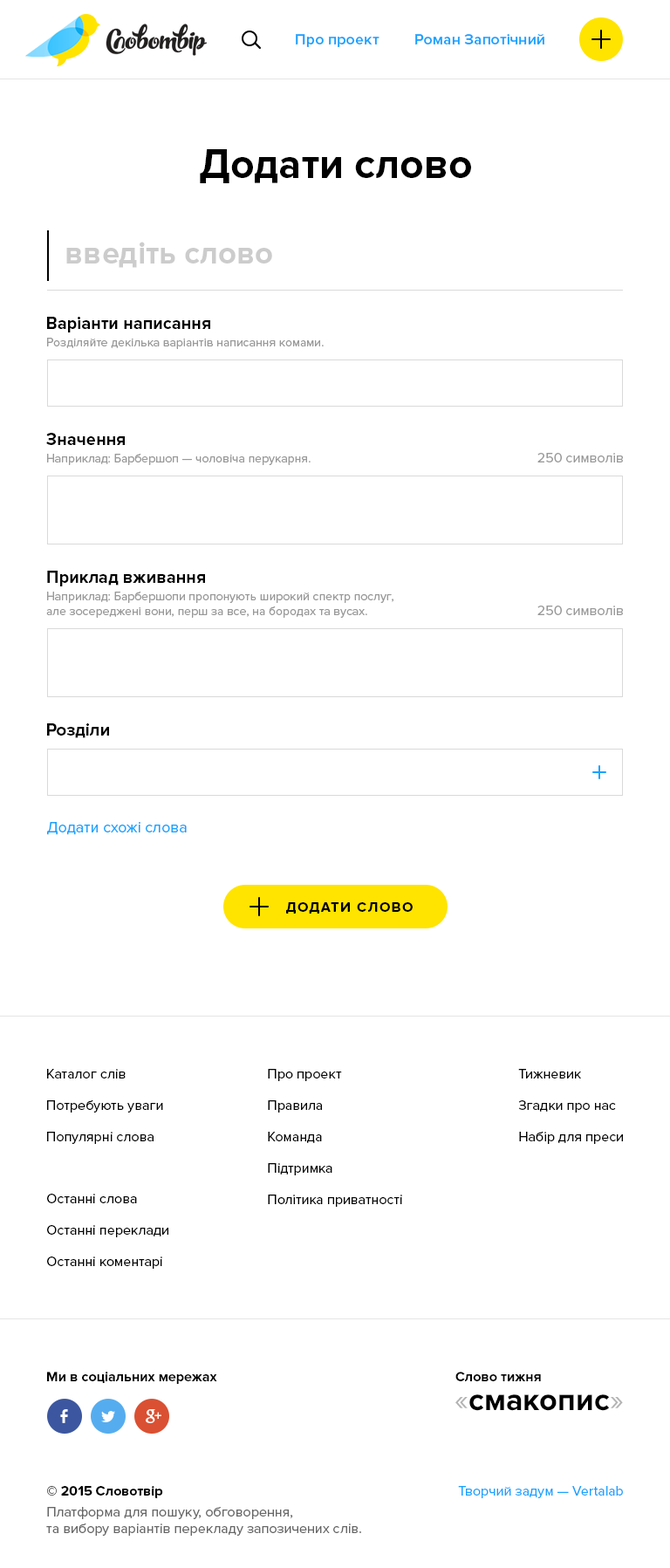
<style>
.page{position:relative;width:670px;height:1568px;background:#ffffff}
.page>*{position:absolute;margin:0}
.t1{font:15.7px "ProximaNova-Semibold";color:#17a2ff}
.t2{font:41.9px "ProximaNova-Bold";color:#000000}
.t3{font:31.4px "ProximaNova-Bold";color:#cccccc}
.t4{font:17.5px "ProximaNova-Bold";color:#000000}
.t5{font:12.2px "ProximaNova-Regular";color:#999999}
.t6{font:14px "ProximaNova-Regular";color:#999999}
.t7{font:17.4px "ProximaNova-Bold";color:#000000}
.t8{font:15.7px "ProximaNova-Regular";color:#17a2ff}
.t9{font:14px "ProximaNova-Bold";letter-spacing:0.1em;color:#000000;text-transform:uppercase}
.t10{font:14px/31.4px "ProximaNova-Regular";color:#000000}
.t11{font:14px/31.4px "ProximaNova-Regular";color:#010101}
.t12{font:14px "ProximaNova-Bold";color:#010101}
.t13{font:31.4px "ProximaNova-Bold";color:#000000}
.t14{font:31.4px "ProximaNova-Regular";color:#b3b3b3}
.t15{font:14px "ProximaNova-Regular";color:#666666}
.t16{font:14px/19.2px "ProximaNova-Bold";color:#000000}
.t17{font:14px/20.9px "ProximaNova-Regular";color:#666666}
.t18{font:14px "ProximaNova-Regular";color:#17a2ff}
</style>
<div class="page">
<p class="t1" style="left:296px;top:34px;width:84px;height:13px">Про проект</p>
<p class="t1" style="left:415px;top:34px;width:129px;height:11px">Роман Запотічний</p>
<p class="t2" style="left:200px;top:149px;width:271px;height:34px">Додати слово</p>
<p class="t3" style="left:66px;top:242px;width:206px;height:26px">введіть слово</p>
<p class="t4" style="left:47px;top:317px;width:163px;height:15px">Варіанти написання</p>
<p class="t5" style="left:47px;top:338px;width:277px;height:11px">Розділяйте декілька варіантів написання комами.</p>
<p class="t4" style="left:46px;top:433px;width:79px;height:12px">Значення</p>
<p class="t5" style="left:47px;top:454px;width:264px;height:11px">Наприклад: Барбершоп — чоловіча перукарня.</p>
<p class="t6" style="left:538px;top:453px;width:85px;height:9px">250 символів</p>
<p class="t4" style="left:47px;top:571px;width:158px;height:15px">Приклад вживання</p>
<p class="t5" style="left:46px;top:592px;width:348px;height:26px">Наприклад: Барбершопи пропонують широкий спектр послуг,<br>але зосереджені вони, перш за все, на бородах та вусах.</p>
<p class="t6" style="left:538px;top:606px;width:85px;height:9px">250 символів</p>
<p class="t7" style="left:47px;top:723px;width:62px;height:15px">Розділи</p>
<p class="t8" style="left:47px;top:822px;width:140px;height:13px">Додати схожі слова</p>
<p class="t9" style="left:286px;top:902px;width:127px;height:12px">Додати слово</p>
<p class="t10" style="left:47px;top:1069px;width:116px;height:75px">Каталог слів<br>Потребують уваги<br>Популярні слова</p>
<p class="t10" style="left:268px;top:1069px;width:134px;height:138px">Про проект<br>Правила<br>Команда<br>Підтримка<br>Політика приватності</p>
<p class="t11" style="left:518px;top:1069px;width:105px;height:75px">Тижневик<br>Згадки про нас<br>Набір для преси</p>
<p class="t10" style="left:47px;top:1194px;width:121px;height:75px">Останні слова<br>Останні переклади<br>Останні коментарі</p>
<p class="t12" style="left:47px;top:1372px;width:170px;height:12px">Ми в соціальних мережах</p>
<p class="t12" style="left:455px;top:1372px;width:86px;height:9px">Слово тижня</p>
<p class="t13" style="left:455px;top:1394px;width:168px;height:17px"><span class="t14">«</span>смакопис<span class="t14">»</span></p>
<p class="t15" style="left:46px;top:1486px;width:315px;height:50px"><span class="t16">© 2015 Словотвір<br></span><span class="t17">Платформа для пошуку, обговорення,<br></span>та вибору варіантів перекладу запозичених слів.</p>
<p class="t18" style="left:458px;top:1486px;width:165px;height:12px">Творчий задум — Vertalab</p>
</div>
